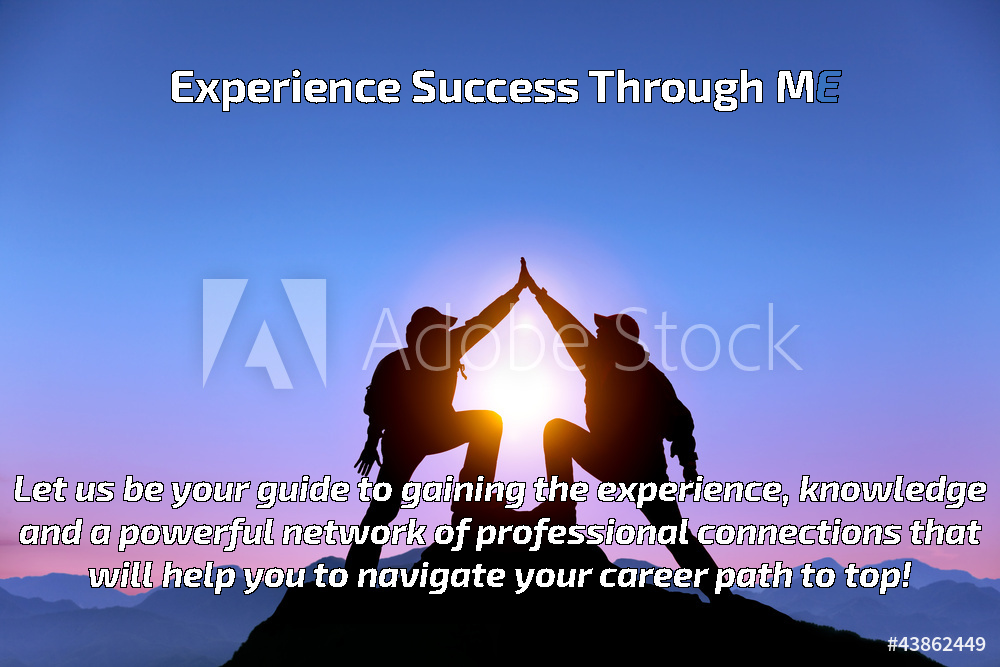
<style>
.page{position:relative;width:1000px;height:667px}
.page>*{position:absolute;margin:0}
.t1{font:44.5px "Exo2-Bold";color:#ffffff}
.t2{font:44.5px "Exo2-BoldItalic";color:#3872bf}
.t3{font:35.6px "Exo2-BoldItalic";color:#fefefe}
</style>
<div class="page">
<p class="t1" style="left:172px;top:70px;width:669px;height:41px">Experience Success Through M<span class="t2">E</span></p>
<p class="t3" style="left:15px;top:476px;width:971px;height:118px;text-align:center">Let us be your guide to gaining the experience, knowledge and a powerful network of professional connections that will help you to navigate your career path to top!</p>
</div>
